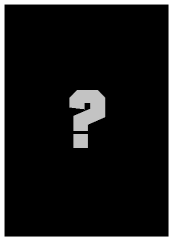
<style>
.page{position:relative;width:173px;height:241px;background:#000000}
.page>*{position:absolute;margin:0}
.t1{font:80px "Autumn";color:#c3c3c3}
</style>
<div class="page">
<p class="t1" style="left:69px;top:90px;width:37px;height:58px">?</p>
</div>
